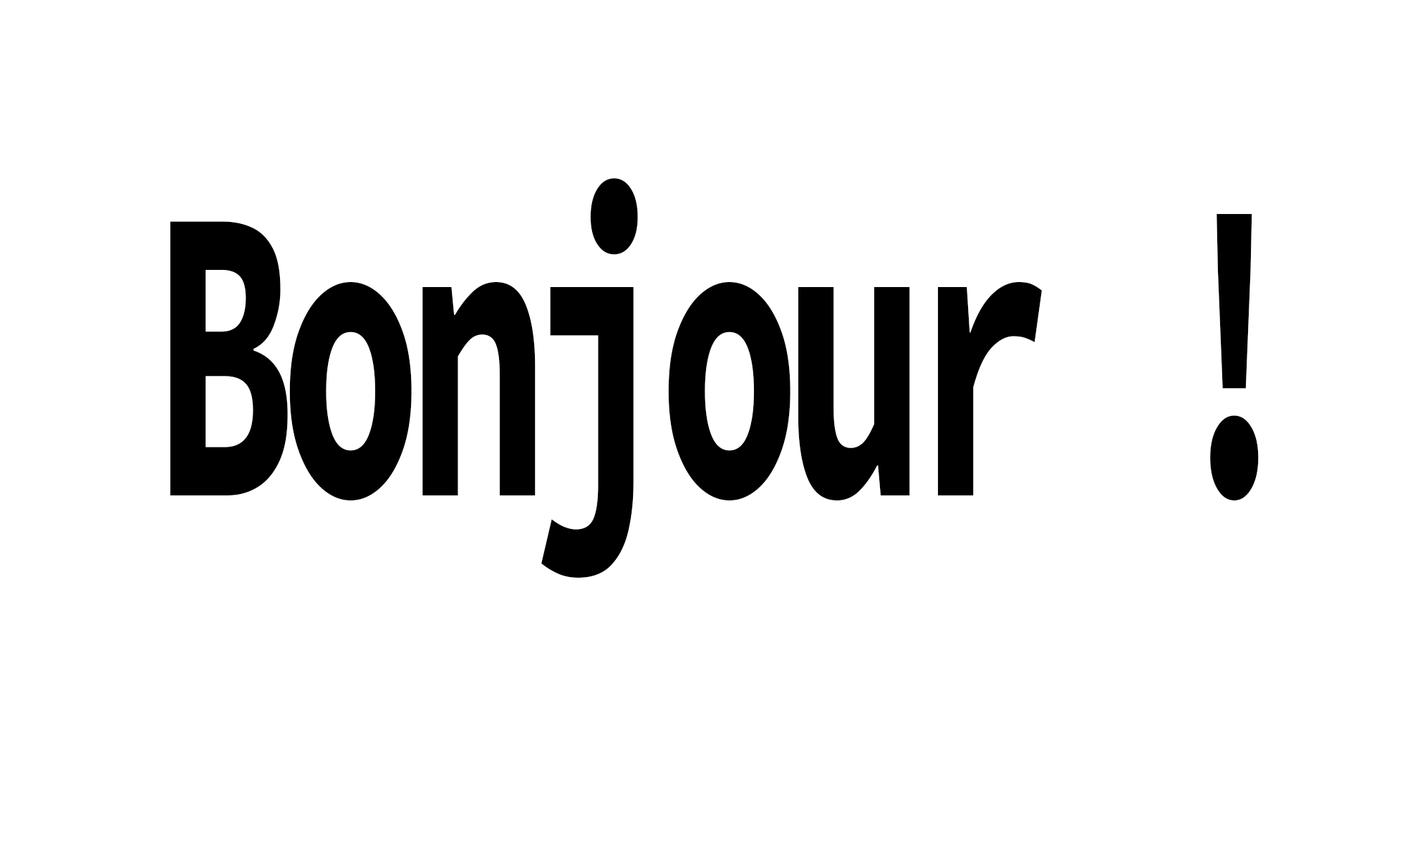
<style>
.page{position:relative;width:1412px;height:844px;background:#ffffff}
.page>*{position:absolute;margin:0}
.t1{font:420.1px "SourceCodePro-Bold";letter-spacing:-0.075em;color:#000000;scale:0.57 1}
</style>
<div class="page">
<p class="t1" style="left:170px;top:178px;width:1089px;height:400px">Bonjour !</p>
</div>
